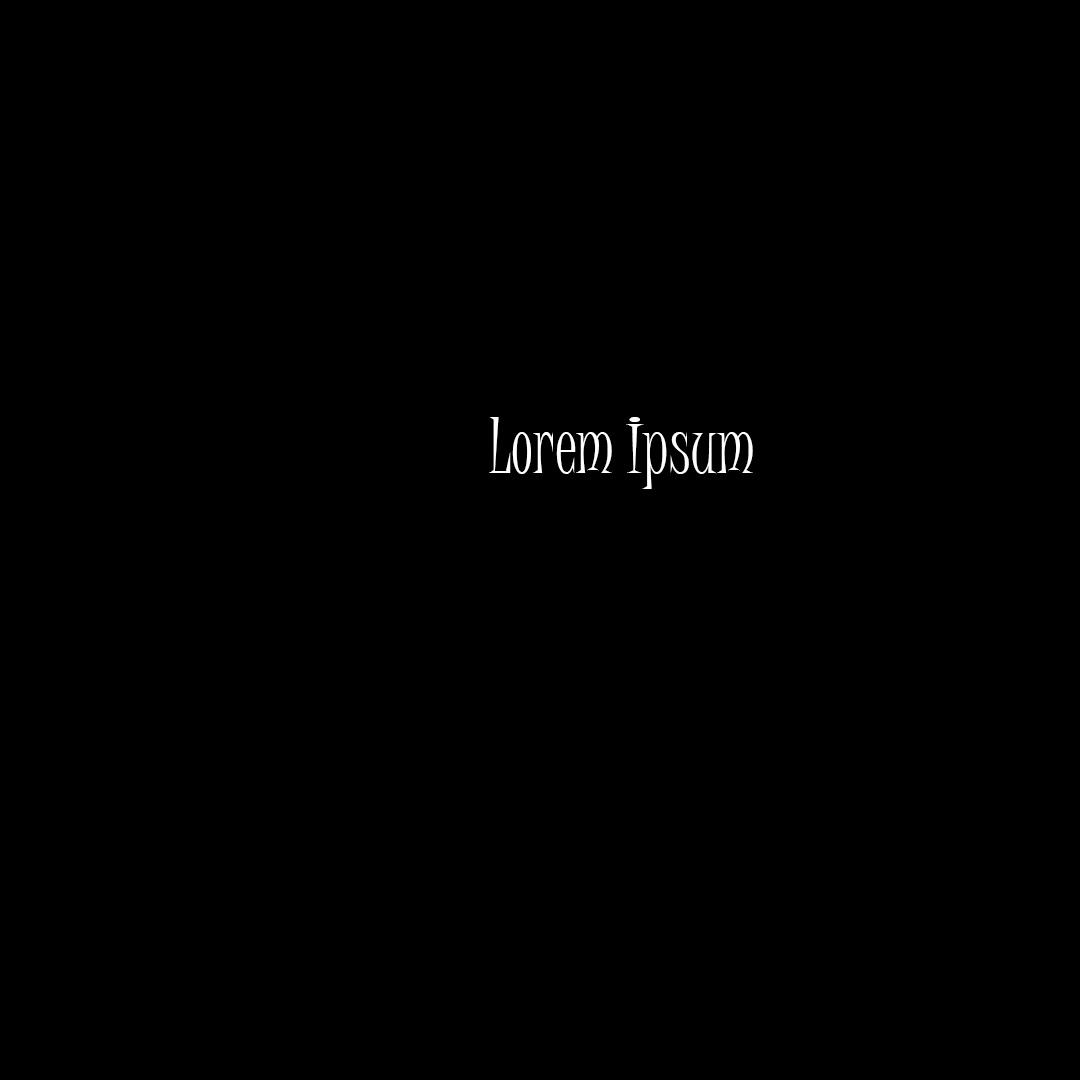
<style>
.page{position:relative;width:1080px;height:1080px;background:#000000}
.page>*{position:absolute;margin:0}
.t1{font:75px "JuiceITC-Regular";color:#ffffff}
</style>
<div class="page">
<p class="t1" style="left:489px;top:417px;width:264px;height:72px">Lorem Ipsum</p>
</div>
